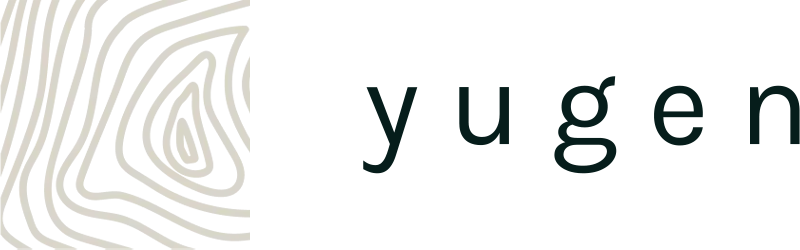
<style>
.page{position:relative;width:800px;height:250px;background:#ffffff}
.page>*{position:absolute;margin:0}
.t1{font:118.8px "Karla-Regular";letter-spacing:0.25em;color:#061d1b}
</style>
<div class="page">
<p class="t1" style="left:363px;top:76px;width:437px;height:98px">yugen</p>
</div>
